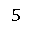
<style>
.page{position:relative;width:32px;height:32px;background:#ffffff}
.page>*{position:absolute;margin:0}
.t1{font:17.8px "MyriadPro-Regular";color:#000000;scale:1.12 1}
</style>
<div class="page">
<p class="t1" style="left:12px;top:9px;width:8px;height:12px">5</p>
</div>
